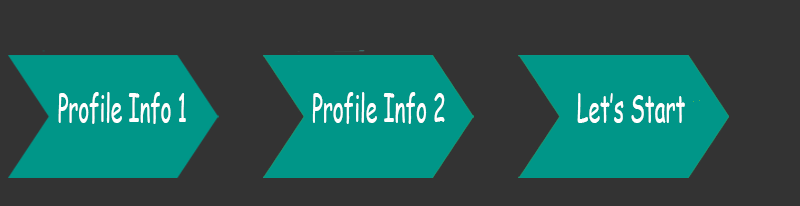
<style>
.page{position:relative;width:800px;height:206px;background:#333333}
.page>*{position:absolute;margin:0}
.t1{font:38px "ComicSansMS";color:#ffffff;scale:0.54 1}
.t2{font:38px "ComicSansMS";color:#ffffff;scale:0.55 1}
</style>
<div class="page">
<p class="t1" style="left:58px;top:92px;width:128px;height:32px">Profile Info 1</p>
<p class="t2" style="left:312px;top:92px;width:133px;height:32px">Profile Info 2</p>
<p class="t2" style="left:577px;top:93px;width:108px;height:30px">Let’s Start</p>
</div>
